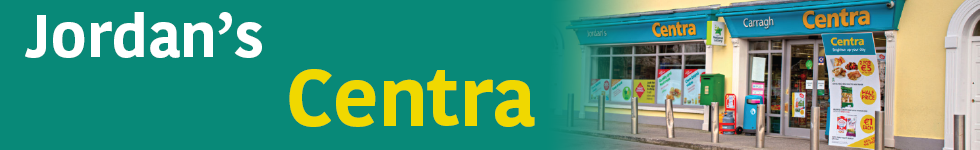
<style>
.page{position:relative;width:980px;height:150px;background:#088978}
.page>*{position:absolute;margin:0}
.t1{font:60px "KohinoorDevanagari-Bold";color:#ffffff}
.t2{font:80px "KohinoorDevanagari-Bold";color:#f0d800}
</style>
<div class="page">
<p class="t1" style="left:25px;top:12px;width:237px;height:46px">Jordan’s</p>
<p class="t2" style="left:289px;top:69px;width:246px;height:58px">Centra</p>
</div>
